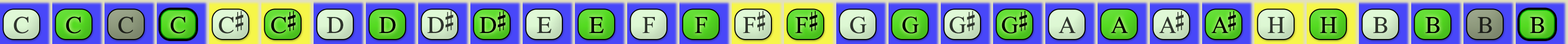
<style>
.page{position:relative;width:1568px;height:44px}
.page>*{position:absolute;margin:0}
.t1{font:24.1px "OpusChords";color:#30362e}
.t2{font:24.1px "OpusChords";color:#000000}
.t3{font:24.1px "OpusChords";color:#1f211b}
.t4{font:24.1px "OpusChords";color:#2f352d}
.t5{font:24.1px "OpusChords";letter-spacing:-0.025em;color:#2f352d}
.t6{font:24.1px "OpusChords";letter-spacing:-0.025em;color:#000000}
.t7{font:24.1px "OpusChords";color:#30352d}
.t8{font:24.1px "OpusChords";letter-spacing:-0.1em;color:#2f352d}
.t9{font:24.1px "OpusChords";letter-spacing:-0.1em;color:#000000}
</style>
<div class="page">
<p class="t1" style="left:14px;top:17px;width:15px;height:17px">C</p>
<p class="t2" style="left:66px;top:17px;width:15px;height:17px">C</p>
<p class="t3" style="left:118px;top:17px;width:15px;height:17px">C</p>
<p class="t2" style="left:170px;top:17px;width:15px;height:17px">C</p>
<p class="t4" style="left:219px;top:11px;width:24px;height:23px">C#</p>
<p class="t2" style="left:271px;top:11px;width:25px;height:23px">C#</p>
<p class="t4" style="left:327px;top:17px;width:16px;height:16px">D</p>
<p class="t2" style="left:379px;top:17px;width:17px;height:16px">D</p>
<p class="t5" style="left:427px;top:11px;width:26px;height:22px">D#</p>
<p class="t6" style="left:479px;top:11px;width:27px;height:22px">D#</p>
<p class="t1" style="left:537px;top:17px;width:14px;height:16px">E</p>
<p class="t2" style="left:589px;top:17px;width:15px;height:16px">E</p>
<p class="t1" style="left:642px;top:17px;width:13px;height:16px">F</p>
<p class="t2" style="left:695px;top:17px;width:12px;height:16px">F</p>
<p class="t7" style="left:743px;top:11px;width:22px;height:22px">F#</p>
<p class="t2" style="left:795px;top:11px;width:23px;height:22px">F#</p>
<p class="t4" style="left:850px;top:17px;width:16px;height:17px">G</p>
<p class="t2" style="left:902px;top:17px;width:17px;height:17px">G</p>
<p class="t5" style="left:949px;top:11px;width:26px;height:23px">G#</p>
<p class="t6" style="left:1002px;top:11px;width:25px;height:23px">G#</p>
<p class="t4" style="left:1058px;top:17px;width:17px;height:16px">A</p>
<p class="t2" style="left:1111px;top:17px;width:17px;height:16px">A</p>
<p class="t8" style="left:1159px;top:11px;width:25px;height:22px">A#</p>
<p class="t9" style="left:1211px;top:11px;width:25px;height:22px">A#</p>
<p class="t7" style="left:1267px;top:17px;width:18px;height:16px">H</p>
<p class="t2" style="left:1320px;top:17px;width:17px;height:16px">H</p>
<p class="t7" style="left:1373px;top:17px;width:15px;height:16px">B</p>
<p class="t2" style="left:1425px;top:17px;width:15px;height:16px">B</p>
<p class="t3" style="left:1478px;top:17px;width:14px;height:16px">B</p>
<p class="t2" style="left:1530px;top:17px;width:14px;height:16px">B</p>
</div>
